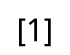
<style>
.page{position:relative;width:70px;height:55px;background:#ffffff}
.page>*{position:absolute;margin:0}
.t1{font:31.8px "DroidSans";color:#000000}
</style>
<div class="page">
<p class="t1" style="left:19px;top:18px;width:32px;height:29px">[1]</p>
</div>
